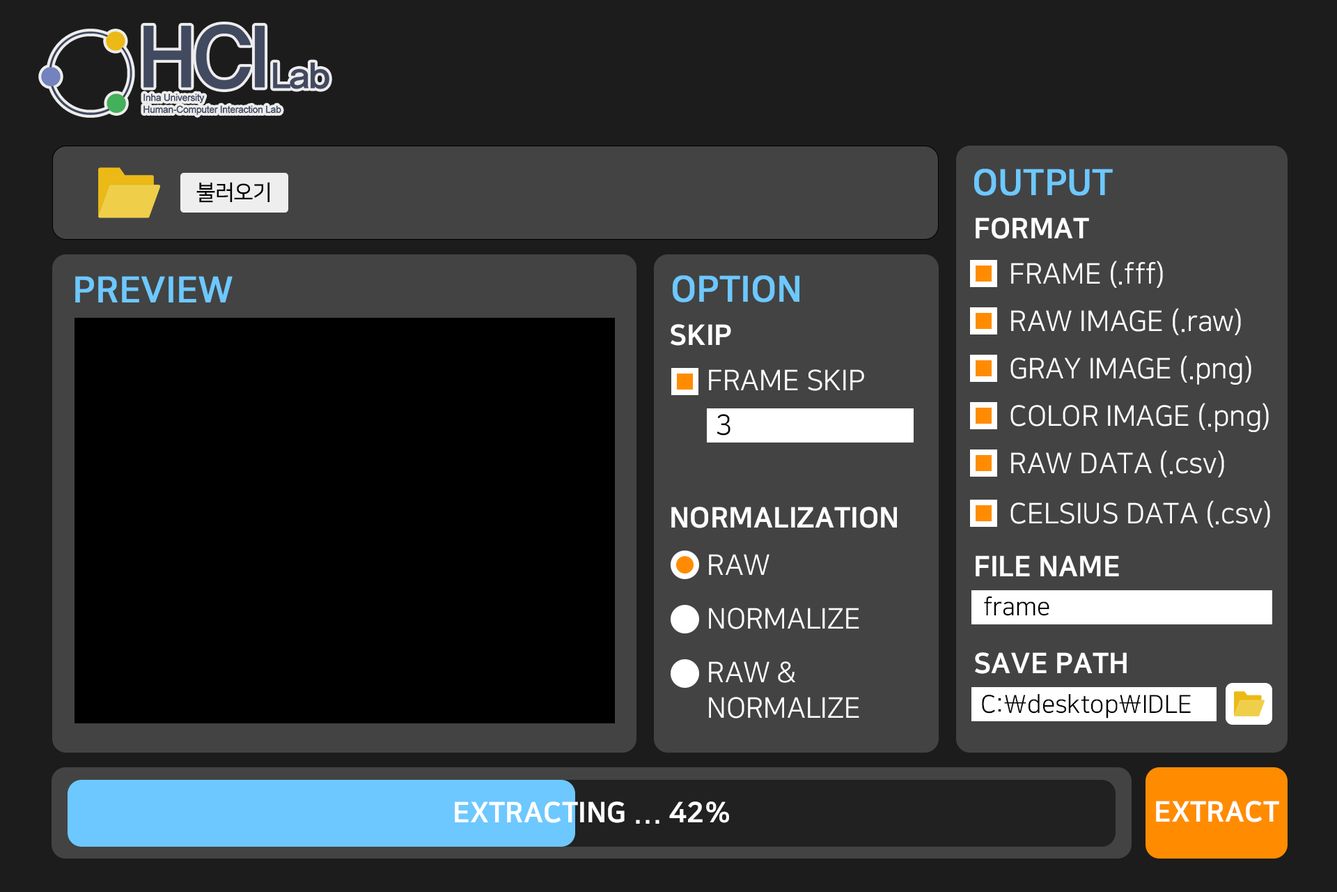
<style>
.page{position:relative;width:1337px;height:892px;background:#434343}
.page>*{position:absolute;margin:0}
.t1{font:35.4px "NanumSquareB";color:#6dc8ff;font-weight:bold}
.t2{font:21.2px "NanumSquareR";letter-spacing:-0.05em;color:#000000;font-weight:bold}
.t3{font:28.3px "NanumSquareEB";color:#ffffff}
.t4{font:28.3px "NanumSquareR";color:#ffffff}
.t5{font:28.3px "NanumSquareR";letter-spacing:-0.05em;color:#000000}
.t6{font:24.8px "NanumSquareR";color:#000000}
.t7{font:28.3px/35.4px "NanumSquareR";color:#ffffff}
</style>
<div class="page">
<p class="t1" style="left:974px;top:169px;width:139px;height:27px">OUTPUT</p>
<p class="t2" style="left:196px;top:182px;width:74px;height:21px">불러오기</p>
<p class="t3" style="left:976px;top:217px;width:113px;height:22px">FORMAT</p>
<p class="t4" style="left:1011px;top:261px;width:152px;height:27px">FRAME (.fff)</p>
<p class="t1" style="left:75px;top:276px;width:158px;height:26px">PREVIEW</p>
<p class="t1" style="left:673px;top:275px;width:127px;height:27px">OPTION</p>
<p class="t4" style="left:1011px;top:308px;width:230px;height:27px">RAW IMAGE (.raw)</p>
<p class="t3" style="left:671px;top:324px;width:60px;height:21px">SKIP</p>
<p class="t4" style="left:1011px;top:355px;width:241px;height:30px">GRAY IMAGE (.png)</p>
<p class="t4" style="left:709px;top:369px;width:155px;height:22px">FRAME SKIP</p>
<p class="t5" style="left:717px;top:414px;width:14px;height:21px">3</p>
<p class="t4" style="left:1011px;top:403px;width:258px;height:29px">COLOR IMAGE (.png)</p>
<p class="t4" style="left:1011px;top:450px;width:214px;height:27px">RAW DATA (.csv)</p>
<p class="t3" style="left:671px;top:506px;width:226px;height:22px">NORMALIZATION</p>
<p class="t4" style="left:1011px;top:500px;width:260px;height:27px">CELSIUS DATA (.csv)</p>
<p class="t4" style="left:709px;top:554px;width:61px;height:21px">RAW</p>
<p class="t3" style="left:976px;top:555px;width:143px;height:21px">FILE NAME</p>
<p class="t6" style="left:984px;top:596px;width:66px;height:20px">frame</p>
<p class="t4" style="left:709px;top:607px;width:151px;height:22px">NORMALIZE</p>
<p class="t3" style="left:975px;top:652px;width:152px;height:22px">SAVE PATH</p>
<p class="t7" style="left:709px;top:661px;width:151px;height:57px">RAW &amp;<br>NORMALIZE</p>
<p class="t6" style="left:982px;top:694px;width:209px;height:24px">C:\desktop\IDLE</p>
<p class="t3" style="left:455px;top:801px;width:274px;height:22px">EXTRACTING ... 42%</p>
<p class="t3" style="left:1156px;top:800px;width:124px;height:22px">EXTRACT</p>
</div>
